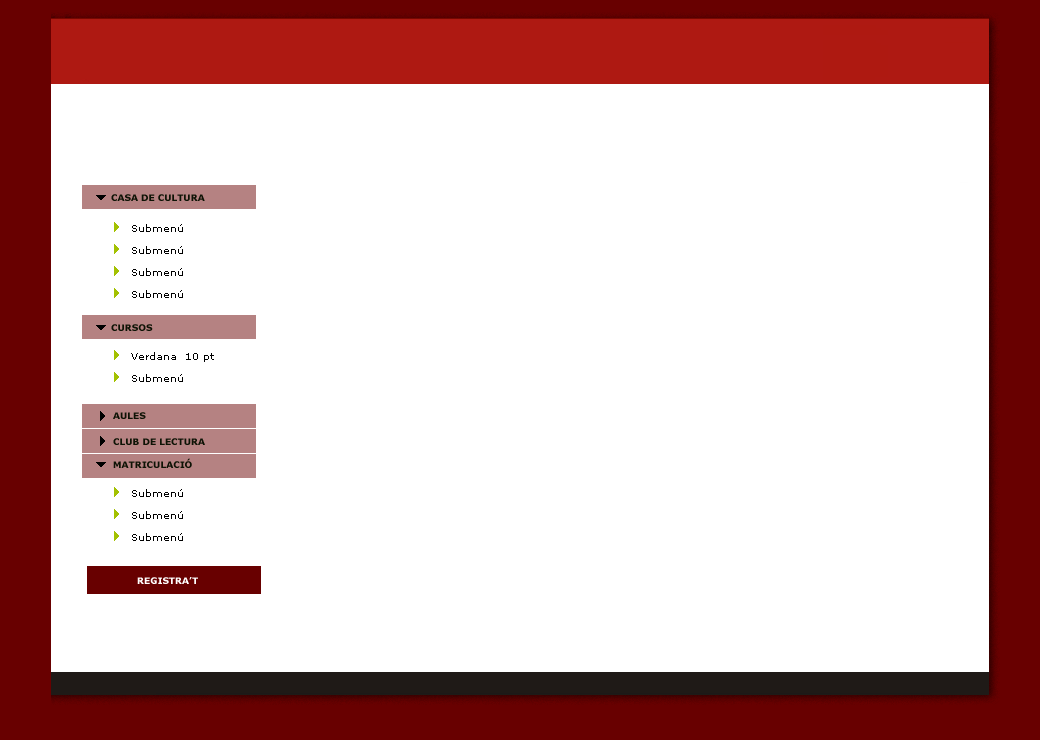
<style>
.page{position:relative;width:1040px;height:740px;background:#ffffff}
.page>*{position:absolute;margin:0}
.t1{font:9px "Verdana-Bold";color:#0e1305}
.t2{font:10px/22px "Verdana";color:#000000}
.t3{font:15px/22px "Webdings";color:#a3c101}
.t4{font:9px "Verdana-Bold";color:#ffffff}
</style>
<div class="page">
<p class="t1" style="left:111px;top:194px;width:94px;height:7px">CASA DE CULTURA</p>
<p class="t2" style="left:114px;top:222px;width:69px;height:76px"><span class="t3">4 </span>Submenú<br><span class="t3">4 </span>Submenú<br><span class="t3">4 </span>Submenú<br><span class="t3">4 </span>Submenú</p>
<p class="t1" style="left:111px;top:324px;width:42px;height:7px">CURSOS</p>
<p class="t2" style="left:114px;top:350px;width:100px;height:32px"><span class="t3">4 </span>Verdana  10 pt<br><span class="t3">4 </span>Submenú</p>
<p class="t1" style="left:113px;top:412px;width:33px;height:7px">AULES</p>
<p class="t1" style="left:113px;top:438px;width:92px;height:7px">CLUB DE LECTURA</p>
<p class="t1" style="left:113px;top:458px;width:79px;height:10px">MATRICULACIÓ</p>
<p class="t2" style="left:114px;top:487px;width:69px;height:54px"><span class="t3">4 </span>Submenú<br><span class="t3">4 </span>Submenú<br><span class="t3">4 </span>Submenú</p>
<p class="t4" style="left:137px;top:577px;width:61px;height:7px">REGISTRA’T</p>
</div>
